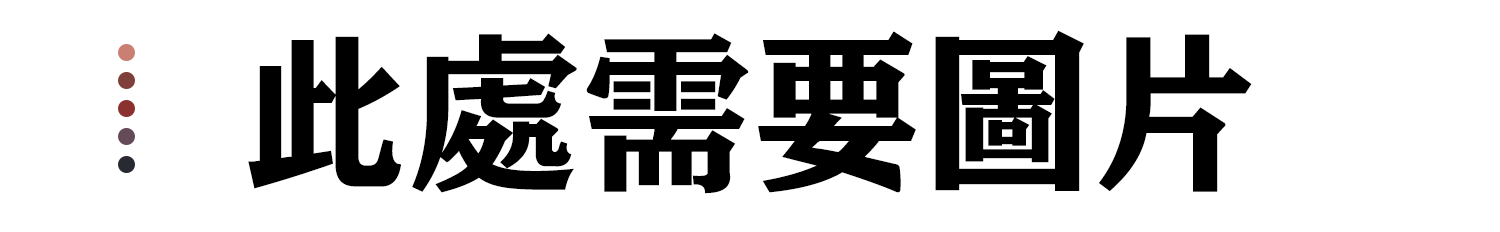
<style>
.page{position:relative;width:1500px;height:232px;background:#ffffff}
.page>*{position:absolute;margin:0}
.t1{font:170.7px "FZCHSFW--GB1-0";color:#000000}
</style>
<div class="page">
<p class="t1" style="left:248px;top:30px;width:1004px;height:164px">此处需要图片</p>
</div>
